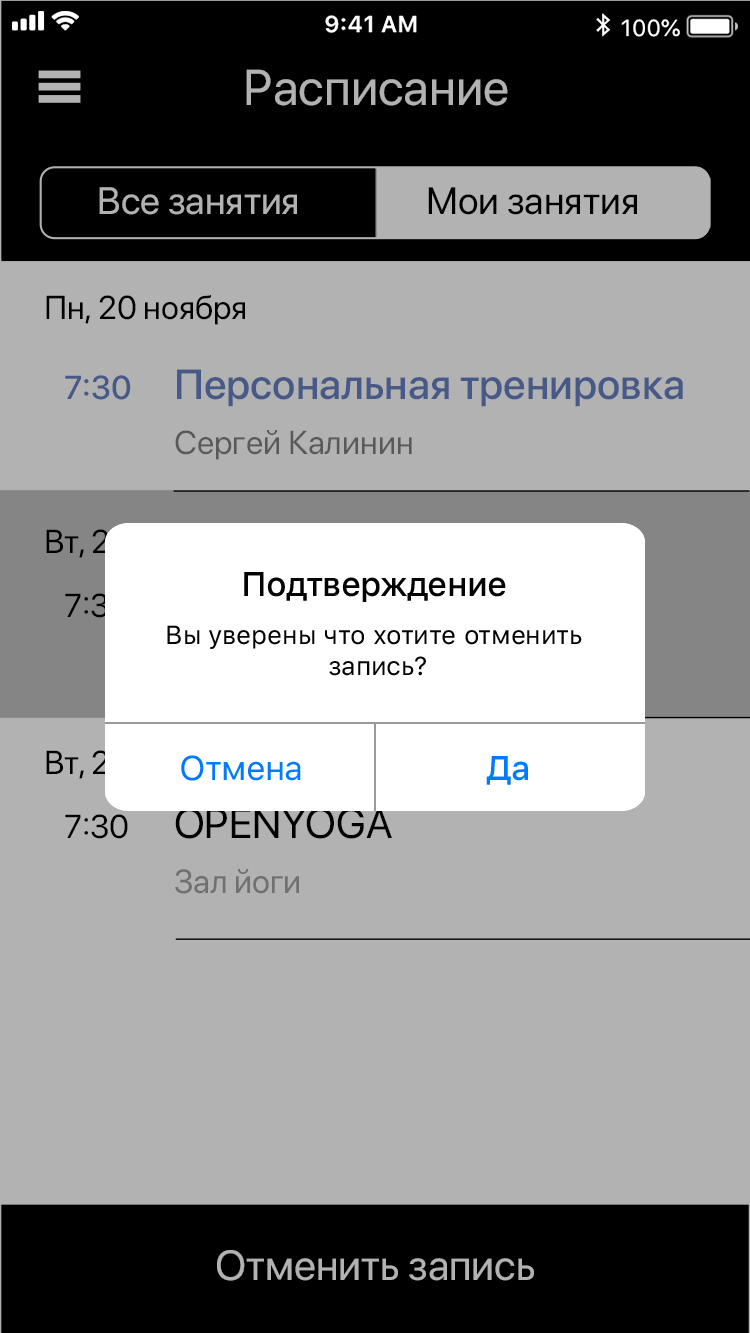
<style>
.page{position:relative;width:750px;height:1333px;background:#b2b2b2}
.page>*{position:absolute;margin:0}
.t1{font:50px "SFProDisplay-Regular";color:#b2b2b2}
.t2{font:38px "SFProDisplay-Regular";color:#b2b2b2}
.t3{font:38px "SFProDisplay-Regular";color:#000000}
.t4{font:33px "SFProDisplay-Regular";color:#000000}
.t5{font:33px "SFProDisplay-Medium";color:#475987}
.t6{font:42px "SFProDisplay-Medium";color:#475987}
.t7{font:33px "SFProDisplay-Regular";color:#595959}
.t8{font:34px "SFProText-Medium";letter-spacing:-0.024em;color:#030303}
.t9{font:26px "SFProText-Regular";letter-spacing:-0.006em;color:#030303}
.t10{font:34px "SFProText-Regular";letter-spacing:-0.024em;color:#007aff}
.t11{font:34px "SFProText-Medium";letter-spacing:-0.024em;color:#007aff}
.t12{font:42px "SFProDisplay-Regular";color:#000000}
.t13{font:33px "SFProDisplay-Regular";color:#707070}
.t14{font:42px "SFProDisplay-Regular";color:#b2b2b2}
</style>
<div class="page">
<p class="t1" style="left:246px;top:69px;width:262px;height:37px">Расписание</p>
<p class="t2" style="left:99px;top:187px;width:198px;height:28px">Все занятия</p>
<p class="t3" style="left:428px;top:187px;width:209px;height:28px">Мои занятия</p>
<p class="t4" style="left:46px;top:295px;width:199px;height:30px">Пн, 20 ноября</p>
<p class="t5" style="left:65px;top:375px;width:66px;height:25px">7:30</p>
<p class="t6" style="left:177px;top:369px;width:506px;height:38px">Персональная тренировка</p>
<p class="t7" style="left:175px;top:430px;width:237px;height:30px">Сергей Калинин</p>
<p class="t8" style="left:244px;top:572px;width:262px;height:30px">Подтверждение</p>
<p class="t9" style="left:167px;top:625px;width:415px;height:51px;text-align:center">Вы уверены что хотите отменить <br>запись?</p>
<p class="t10" style="left:181px;top:755px;width:120px;height:26px">Отмена</p>
<p class="t11" style="left:486px;top:756px;width:42px;height:29px">Да</p>
<p class="t12" style="left:175px;top:808px;width:217px;height:31px">OPENYOGA</p>
<p class="t4" style="left:65px;top:814px;width:63px;height:25px">7:30</p>
<p class="t13" style="left:175px;top:869px;width:124px;height:25px">Зал йоги</p>
<p class="t14" style="left:217px;top:1250px;width:317px;height:31px">Отменить запись</p>
</div>
